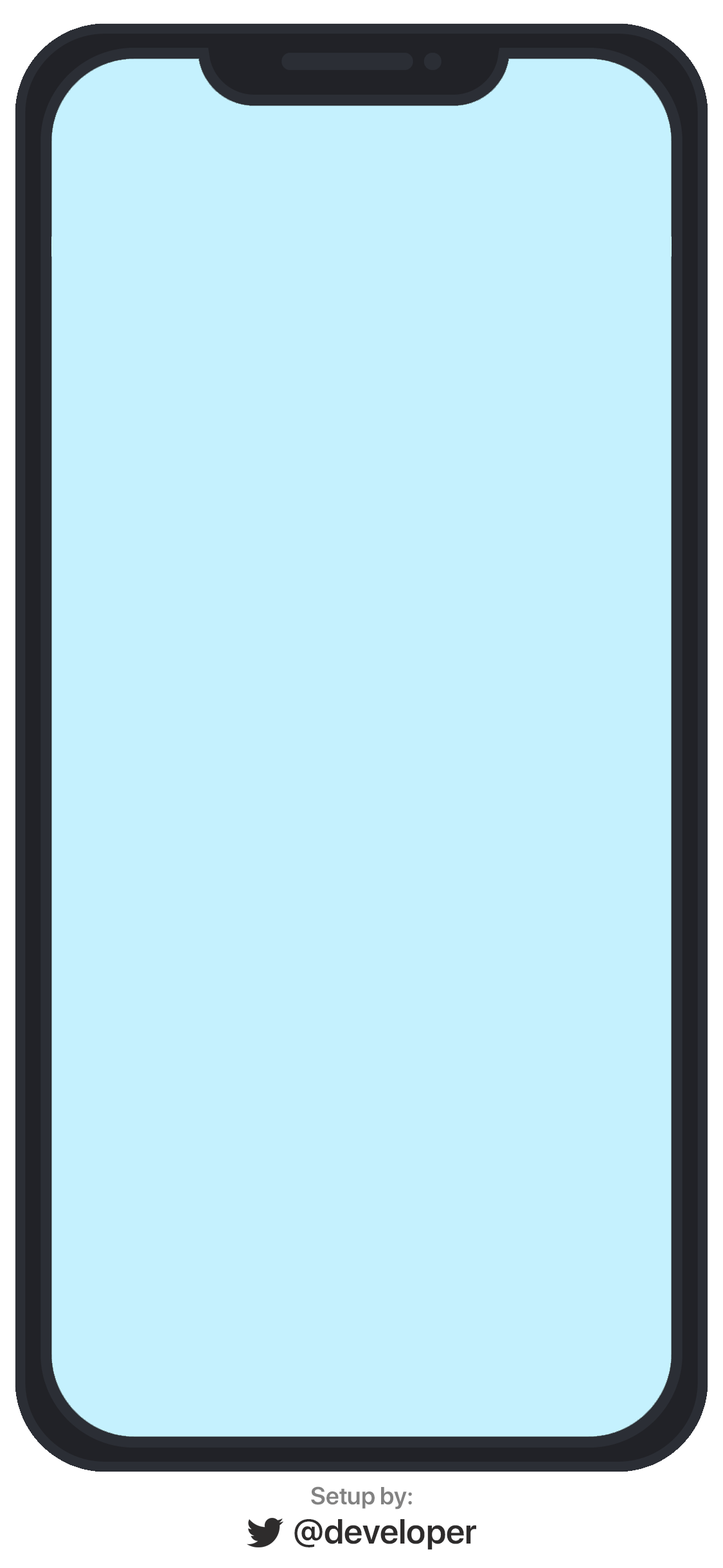
<style>
.page{position:relative;width:723px;height:1568px;background:#c5f1fe}
.page>*{position:absolute;margin:0}
.t1{font:24.5px "SFProDisplay-Semibold";color:#828282}
.t2{font:34.8px "SFProDisplay-Semibold";color:#2e2c2c}
</style>
<div class="page">
<p class="t1" style="left:311px;top:1486px;width:101px;height:23px">Setup by:</p>
<p class="t2" style="left:294px;top:1519px;width:182px;height:31px">@developer</p>
</div>
